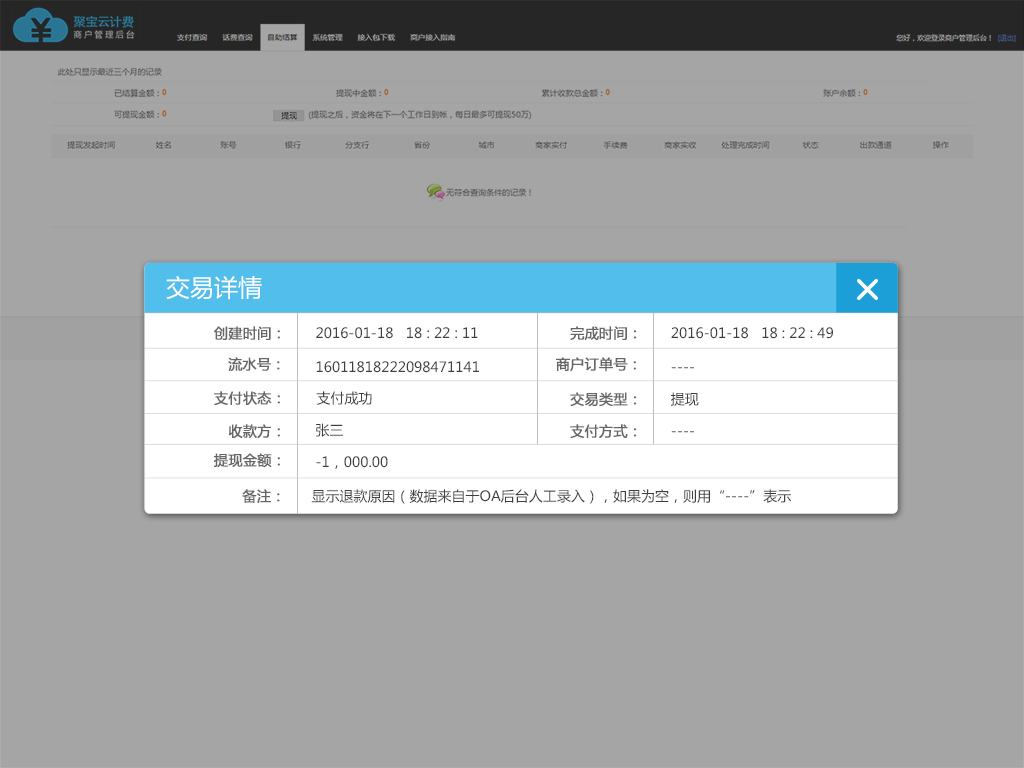
<style>
.page{position:relative;width:1024px;height:768px;background:#a5a5a5}
.page>*{position:absolute;margin:0}
.t1{font:24px "MicrosoftYaHei";color:#ffffff}
.t2{font:14px "MicrosoftYaHei";color:#666666;font-weight:bold}
.t3{font:14px "MicrosoftYaHei";color:#3f3f3f}
.t4{font:14px "MicrosoftYaHei"}
</style>
<div class="page">
<p class="t1" style="left:166px;top:276px;width:96px;height:24px">交易详情</p>
<p class="t2" style="left:214px;top:326px;width:66px;height:14px">创建时间：</p>
<p class="t3" style="left:316px;top:327px;width:162px;height:12px">2016-01-18   18 : 22 : 11</p>
<p class="t2" style="left:570px;top:326px;width:67px;height:14px">完成时间：</p>
<p class="t3" style="left:671px;top:327px;width:162px;height:12px">2016-01-18   18 : 22 : 49</p>
<p class="t2" style="left:228px;top:357px;width:52px;height:14px">流水号：</p>
<p class="t3" style="left:316px;top:361px;width:163px;height:12px">16011818222098471141</p>
<p class="t2" style="left:556px;top:357px;width:80px;height:15px">商户订单号：</p>
<p class="t4" style="left:671px;top:367px;width:23px;height:2px">----</p>
<p class="t2" style="left:214px;top:391px;width:66px;height:14px">支付状态：</p>
<p class="t3" style="left:316px;top:391px;width:56px;height:14px">支付成功</p>
<p class="t2" style="left:570px;top:392px;width:67px;height:15px">交易类型：</p>
<p class="t3" style="left:671px;top:392px;width:28px;height:14px">提现</p>
<p class="t2" style="left:228px;top:424px;width:52px;height:14px">收款方：</p>
<p class="t3" style="left:316px;top:423px;width:27px;height:14px">张三</p>
<p class="t2" style="left:570px;top:424px;width:67px;height:14px">支付方式：</p>
<p class="t4" style="left:671px;top:431px;width:23px;height:2px">----</p>
<p class="t2" style="left:214px;top:453px;width:66px;height:15px">提现金额：</p>
<p class="t3" style="left:316px;top:456px;width:72px;height:13px">-1，000.00</p>
<p class="t2" style="left:242px;top:489px;width:38px;height:14px">备注：</p>
<p class="t3" style="left:311px;top:489px;width:480px;height:15px">显示退款原因（数据来自于OA后台人工录入），如果为空，则用“----”表示</p>
</div>
